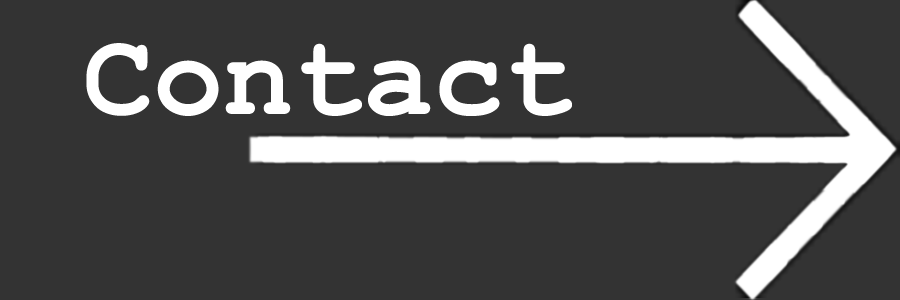
<style>
.page{position:relative;width:900px;height:300px;background:#333333}
.page>*{position:absolute;margin:0}
.t1{font:116.7px "CourierNewPS-BoldMT";color:#ffffff}
</style>
<div class="page">
<p class="t1" style="left:86px;top:43px;width:486px;height:73px">Contact</p>
</div>
